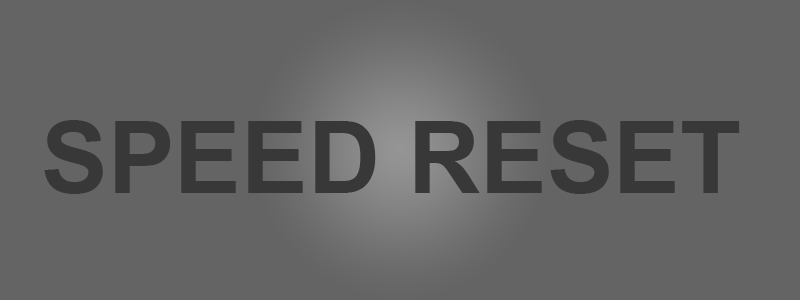
<style>
.page{position:relative;width:800px;height:300px;background:#646464}
.page>*{position:absolute;margin:0}
.t1{font:100px "Arial-BoldMT";color:#383838}
</style>
<div class="page">
<p class="t1" style="left:44px;top:120px;width:696px;height:74px">SPEED RESET</p>
</div>
